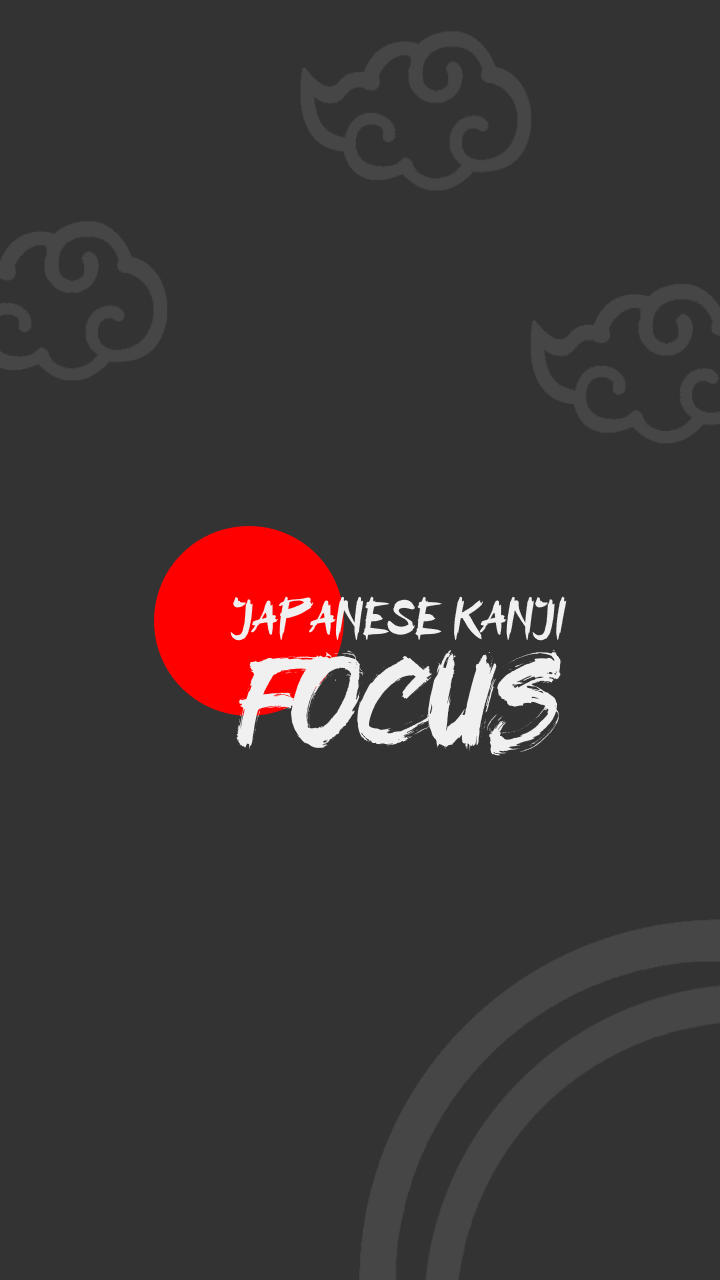
<style>
.page{position:relative;width:720px;height:1280px;background:#333333}
.page>*{position:absolute;margin:0}
.t1{font:47.7px "aAssassinNinja";color:#f0f0f0}
.t2{font:107.4px "XangdaShiny";color:#f0f0f0}
</style>
<div class="page">
<p class="t1" style="left:230px;top:596px;width:337px;height:45px">JAPANESE KANJI</p>
<p class="t2" style="left:236px;top:649px;width:326px;height:107px">FOCUS</p>
</div>
